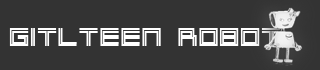
<style>
.page{position:relative;width:320px;height:70px;background:#333333}
.page>*{position:absolute;margin:0}
.t1{font:24.7px "2Lines";letter-spacing:0.075em;color:#ffffff}
</style>
<div class="page">
<p class="t1" style="left:9px;top:28px;width:272px;height:18px">gitlteen. robot</p>
</div>
